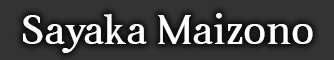
<style>
.page{position:relative;width:334px;height:60px;background:#333333}
.page>*{position:absolute;margin:0}
.t1{font:42px "Aver";color:#ffffff}
</style>
<div class="page">
<p class="t1" style="left:23px;top:13px;width:290px;height:40px">Sayaka Maizono</p>
</div>
